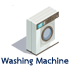
<style>
.page{position:relative;width:70px;height:70px;background:#ffffff}
.page>*{position:absolute;margin:0}
.t1{font:12px "THSarabunNew-Bold";letter-spacing:0.005em;color:#09285a}
</style>
<div class="page">
<p class="t1" style="left:1px;top:57px;width:68px;height:9px">Washing Machine</p>
</div>
